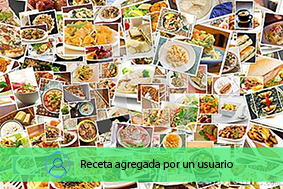
<style>
.page{position:relative;width:283px;height:189px}
.page>*{position:absolute;margin:0}
.t1{font:11.7px "MyriadPro-Regular";color:#000000}
</style>
<div class="page">
<p class="t1" style="left:81px;top:159px;width:152px;height:11px">Receta agregada por un usuario</p>
</div>
